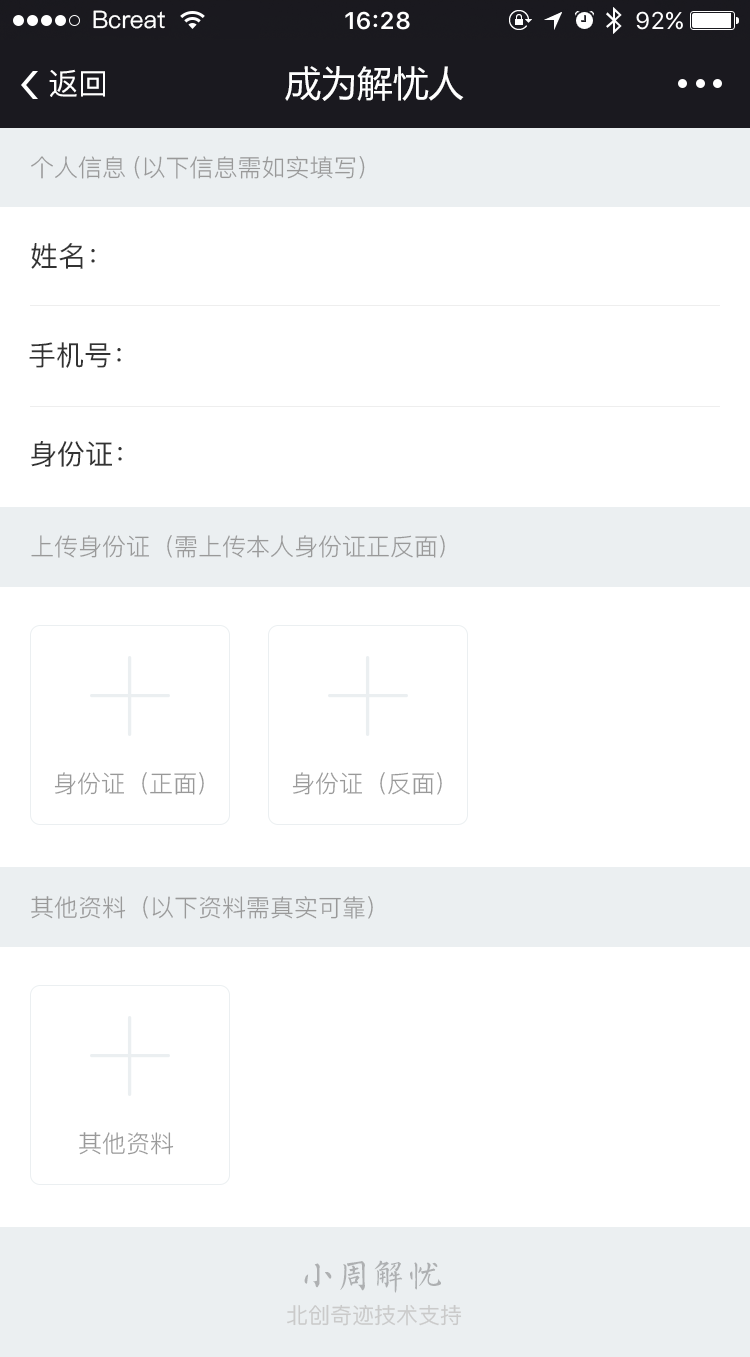
<style>
.page{position:relative;width:750px;height:1357px;background:#ffffff}
.page>*{position:absolute;margin:0}
.t1{font:24px "PingFang-SC-Medium";color:#ffffff}
.t2{font:30px "PingFang-SC-Medium";color:#ffffff}
.t3{font:36px "MicrosoftYaHei";color:#ffffff}
.t4{font:24px "PingFang-SC-Regular";color:#999999}
.t5{font:28px "PingFang-SC-Medium";color:#333333}
.t6{font:35.8px "FZSXSLKJW--GB1-0";letter-spacing:-0.005em;color:#aeb0b2}
.t7{font:22px "PingFang-SC-Medium";color:#cacaca}
</style>
<div class="page">
<p class="t1" style="left:93px;top:10px;width:72px;height:19px">Bcreat</p>
<p class="t2" style="left:49px;top:69px;width:56px;height:28px">返回</p>
<p class="t3" style="left:285px;top:66px;width:179px;height:35px">成为解忧人</p>
<p class="t4" style="left:31px;top:156px;width:334px;height:23px">个人信息（以下信息需如实填写）</p>
<p class="t5" style="left:31px;top:243px;width:64px;height:26px">姓名：</p>
<p class="t5" style="left:29px;top:342px;width:92px;height:26px">手机号：</p>
<p class="t5" style="left:31px;top:441px;width:91px;height:26px">身份证：</p>
<p class="t4" style="left:31px;top:535px;width:414px;height:23px">上传身份证（需上传本人身份证正反面）</p>
<p class="t4" style="left:54px;top:772px;width:150px;height:23px">身份证（正面）</p>
<p class="t4" style="left:292px;top:772px;width:150px;height:23px">身份证（反面）</p>
<p class="t4" style="left:31px;top:896px;width:342px;height:23px">其他资料（以下资料需真实可靠）</p>
<p class="t4" style="left:79px;top:1132px;width:95px;height:23px">其他资料</p>
<p class="t6" style="left:304px;top:1260px;width:137px;height:33px">小周解忧</p>
<p class="t7" style="left:287px;top:1304px;width:175px;height:22px">北创奇迹技术支持</p>
</div>
